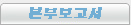
<style>
.page{position:relative;width:131px;height:25px}
.page>*{position:absolute;margin:0}
.t1{font:24px "(ÇÑ)¹®È­¹æ¼Û";color:#72aed4;text-transform:uppercase;font-weight:bold}
</style>
<div class="page">
<p class="t1" style="left:29px;top:7px;width:73px;height:12px">본부보고서</p>
</div>
